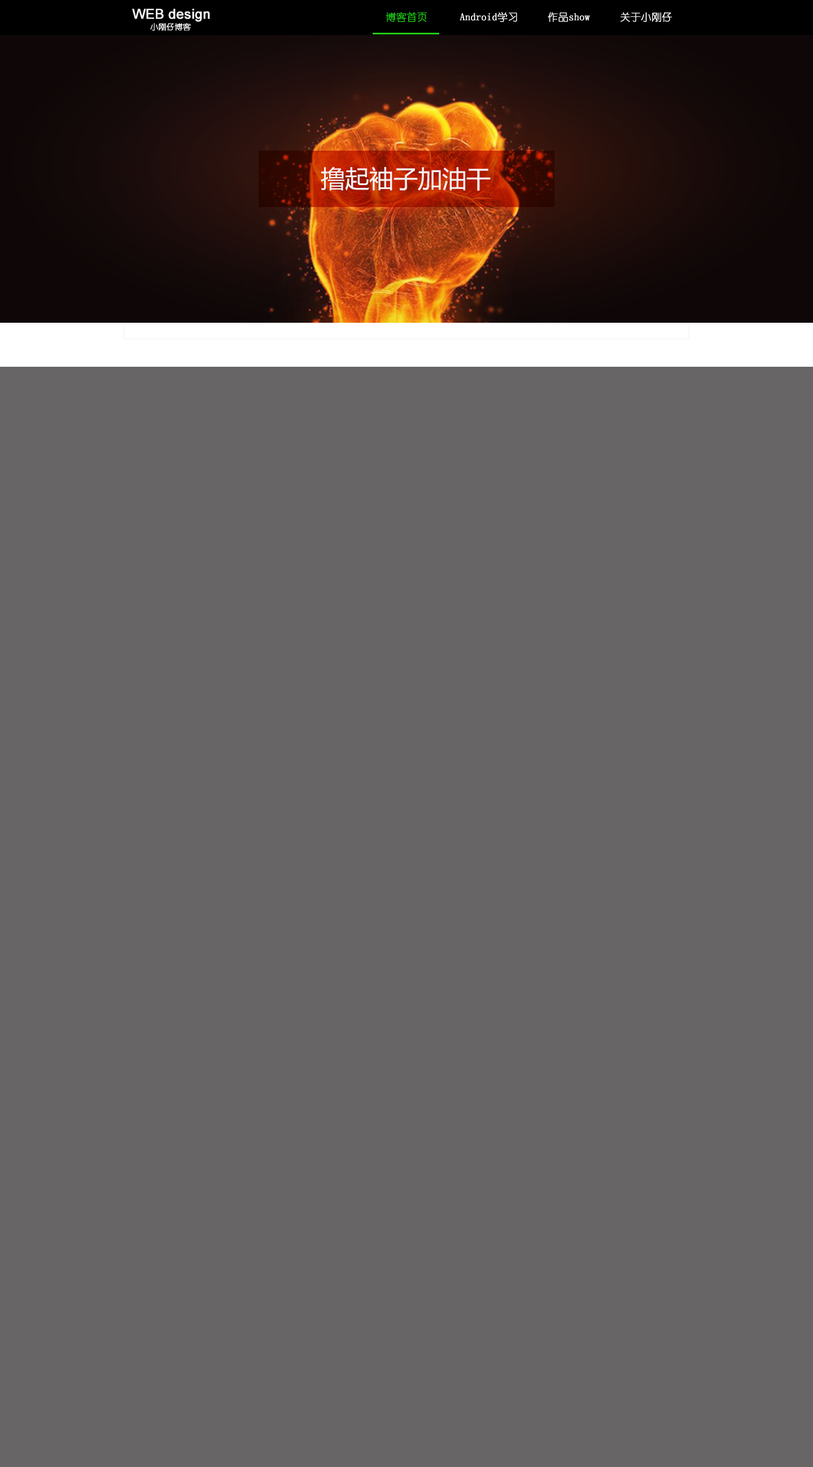
<style>
.page{position:relative;width:813px;height:1467px;background:#676565}
.page>*{position:absolute;margin:0}
.t1{font:13.5px "ArialMT";color:#f6f3f3;font-weight:bold}
.t2{font:10.2px "YouYuan";color:#1bc613;font-weight:bold}
.t3{font:10.2px "YouYuan";color:#ffffff;font-weight:bold}
.t4{font:7.9px "YouYuan";color:#ffffff;font-weight:bold}
.t5{font:24.5px "MicrosoftYaHei";color:#f6f3f3}
</style>
<div class="page">
<p class="t1" style="left:132px;top:8px;width:78px;height:14px">WEB design</p>
<p class="t2" style="left:385px;top:12px;width:42px;height:10px">博客首页</p>
<p class="t3" style="left:459px;top:12px;width:58px;height:10px">Android学习</p>
<p class="t3" style="left:547px;top:12px;width:43px;height:10px">作品show</p>
<p class="t3" style="left:620px;top:12px;width:52px;height:10px">关于小刚仔</p>
<p class="t4" style="left:150px;top:23px;width:41px;height:8px">小刚仔博客</p>
<p class="t5" style="left:321px;top:166px;width:169px;height:25px">撸起袖子加油干</p>
</div>
